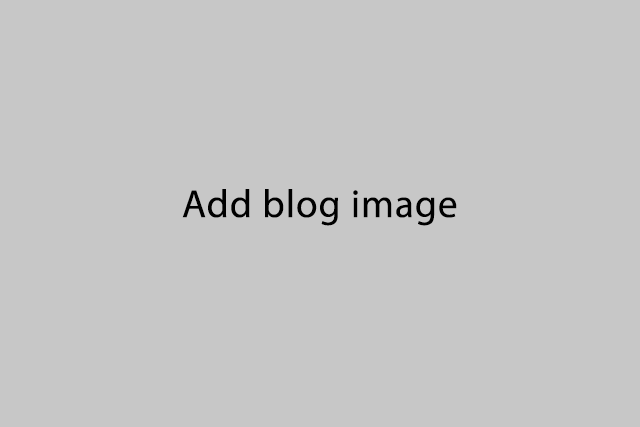
<style>
.page{position:relative;width:640px;height:427px;background:#c7c7c7}
.page>*{position:absolute;margin:0}
.t1{font:39.4px "MyriadPro-Regular";letter-spacing:0.025em;color:#000000}
</style>
<div class="page">
<p class="t1" style="left:182px;top:189px;width:275px;height:37px">Add blog image</p>
</div>
